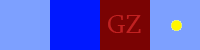
<style>
.page{position:relative;width:200px;height:50px;background:#7da0ff}
.page>*{position:absolute;margin:0}
.t1{font:26.4px "Sylfaen";color:#c12121}
</style>
<div class="page">
<p class="t1" style="left:108px;top:15px;width:33px;height:18px">GZ</p>
</div>
